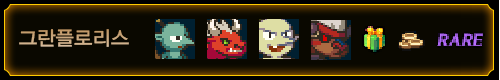
<style>
.page{position:relative;width:500px;height:80px;background:#0a0800}
.page>*{position:absolute;margin:0}
.t1{font:20px "YDIYGO330";color:#cba87f}
</style>
<div class="page">
<p class="t1" style="left:19px;top:29px;width:110px;height:18px">그란플로리스</p>
</div>
